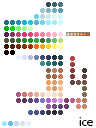
<style>
.page{position:relative;width:96px;height:128px;background:#ffffff}
.page>*{position:absolute;margin:0}
.t1{font:12px "MyriadPro-Regular";color:#000000}
</style>
<div class="page">
<p class="t1" style="left:79px;top:117px;width:14px;height:9px">ice</p>
</div>
